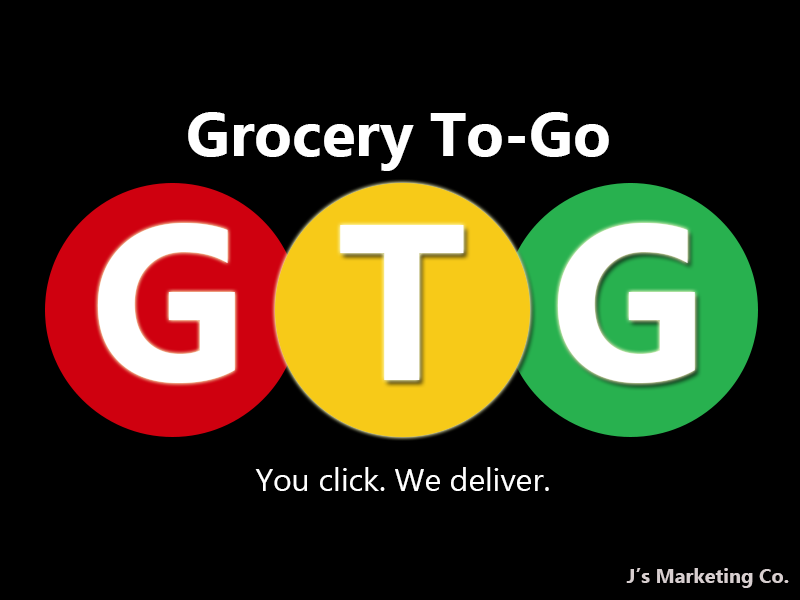
<style>
.page{position:relative;width:800px;height:600px;background:#000000}
.page>*{position:absolute;margin:0}
.t1{font:61.8px "Ebrima-Bold";color:#ffffff}
.t2{font:221.3px "Ebrima-Bold";color:#ffffff}
.t3{font:31.8px "Ebrima";color:#ffffff}
.t4{font:20px "Ebrima-Bold";color:#d8cfd0}
</style>
<div class="page">
<p class="t1" style="left:188px;top:112px;width:421px;height:59px">Grocery To-Go</p>
<p class="t2" style="left:97px;top:223px;width:138px;height:160px">G</p>
<p class="t2" style="left:340px;top:225px;width:124px;height:155px">T</p>
<p class="t2" style="left:557px;top:223px;width:138px;height:160px">G</p>
<p class="t3" style="left:255px;top:467px;width:294px;height:24px">.You click. We deliver</p>
<p class="t4" style="left:626px;top:568px;width:163px;height:20px">.J’s Marketing Co</p>
</div>
